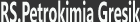
<style>
.page{position:relative;width:140px;height:22px;background:#333333}
.page>*{position:absolute;margin:0}
.t1{font:27.6px "MicrosoftYaHeiUI-Bold";color:#f7faf8;scale:0.48 1}
</style>
<div class="page">
<p class="t1" style="left:1px;top:0px;width:139px;height:23px">RS.Petrokimia Gresik</p>
</div>
